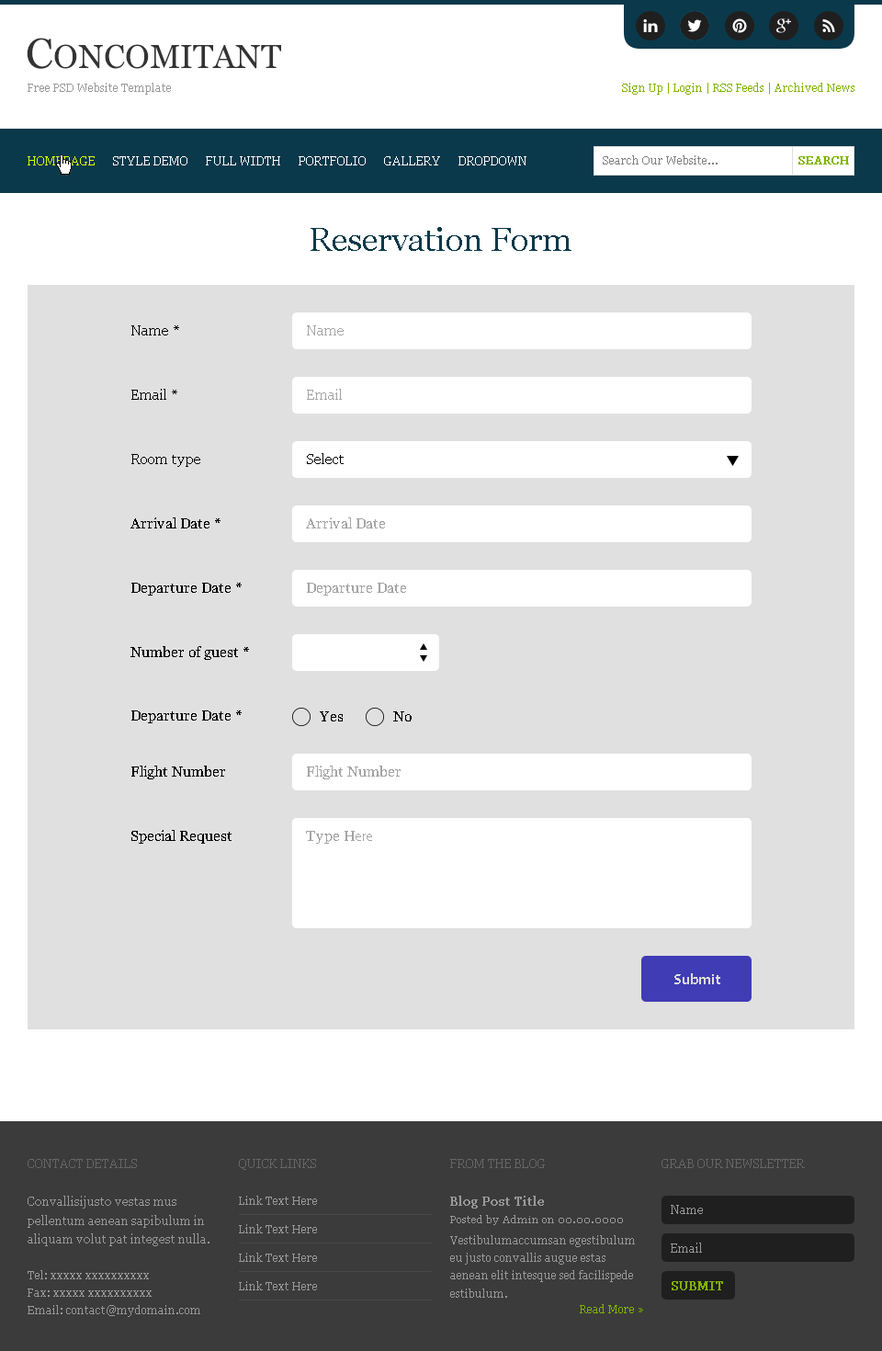
<style>
.page{position:relative;width:882px;height:1351px;background:#ffffff}
.page>*{position:absolute;margin:0}
.t1{font:33.1px "Georgia";color:#333333}
.t2{font:42.3px "Georgia";color:#333333}
.t3{font:11px "Georgia";color:#999999}
.t4{font:11px "Georgia";color:#81b300}
.t5{font:11.9px "Georgia";color:#d8ff00}
.t6{font:11.9px "Georgia";color:#ffffff}
.t7{font:11px "Georgia";color:#7f7f7f}
.t8{font:11px "Georgia";color:#81b300;font-weight:bold}
.t9{font:33.1px "Georgia";color:#0a394b}
.t10{font:14.7px "Georgia";color:#000000}
.t11{font:14.7px "Georgia";color:#a4a4a4}
.t12{font:14.7px "MyriadPro-Regular";color:#a4a4a4}
.t13{font:14.7px "MyriadPro-Bold";color:#e0e0e0}
.t14{font:11.9px "Georgia";color:#666666}
.t15{font:11.9px/19.1px "Georgia";color:#999999}
.t16{font:11px/17.6px "Georgia";color:#999999}
.t17{font:11.9px "Georgia";color:#999999;font-weight:bold}
.t18{font:11.9px "Georgia";color:#999999}
.t19{font:10.1px "Georgia";color:#999999}
.t20{font:11.9px "Georgia";color:#81b300;font-weight:bold}
</style>
<div class="page">
<p class="t1" style="left:27px;top:38px;width:254px;height:31px"><span class="t2">C</span>ONCOMITANT</p>
<p class="t3" style="left:28px;top:83px;width:143px;height:12px">Free PSD Website Template</p>
<p class="t4" style="left:622px;top:83px;width:233px;height:12px">Sign Up | Login | RSS Feeds | Archived News</p>
<p class="t5" style="left:28px;top:156px;width:67px;height:9px">HOMEPAGE</p>
<p class="t6" style="left:113px;top:156px;width:75px;height:9px">STYLE DEMO</p>
<p class="t6" style="left:206px;top:156px;width:74px;height:9px">FULL WIDTH</p>
<p class="t6" style="left:299px;top:156px;width:67px;height:9px">PORTFOLIO</p>
<p class="t6" style="left:384px;top:156px;width:56px;height:9px">GALLERY</p>
<p class="t6" style="left:459px;top:156px;width:68px;height:9px">DROPDOWN</p>
<p class="t7" style="left:603px;top:155px;width:115px;height:10px">Search Our Website...</p>
<p class="t8" style="left:799px;top:156px;width:50px;height:9px">SEARCH</p>
<p class="t9" style="left:311px;top:227px;width:261px;height:24px">Reservation Form</p>
<p class="t10" style="left:131px;top:325px;width:48px;height:11px">Name *</p>
<p class="t11" style="left:307px;top:325px;width:37px;height:11px">Name</p>
<p class="t10" style="left:131px;top:389px;width:46px;height:11px">Email *</p>
<p class="t11" style="left:307px;top:389px;width:35px;height:11px">Email</p>
<p class="t10" style="left:131px;top:454px;width:69px;height:13px">Room type</p>
<p class="t10" style="left:307px;top:453px;width:37px;height:11px">Select</p>
<p class="t10" style="left:131px;top:518px;width:90px;height:11px">Arrival Date *</p>
<p class="t11" style="left:306px;top:518px;width:79px;height:11px">Arrival Date</p>
<p class="t10" style="left:131px;top:583px;width:111px;height:13px">Departure Date *</p>
<p class="t11" style="left:307px;top:583px;width:99px;height:13px">Departure Date</p>
<p class="t10" style="left:131px;top:646px;width:118px;height:14px">Number of guest *</p>
<p class="t10" style="left:131px;top:711px;width:111px;height:12px">Departure Date *</p>
<p class="t10" style="left:320px;top:711px;width:23px;height:11px">Yes</p>
<p class="t10" style="left:393px;top:711px;width:19px;height:11px">No</p>
<p class="t10" style="left:131px;top:766px;width:94px;height:14px">Flight Number</p>
<p class="t11" style="left:307px;top:766px;width:94px;height:14px">Flight Number</p>
<p class="t10" style="left:131px;top:830px;width:101px;height:14px">Special Request</p>
<p class="t11" style="left:306px;top:831px;width:66px;height:13px">Type H<span class="t12">ere</span></p>
<p class="t13" style="left:675px;top:973px;width:46px;height:11px">Submit</p>
<p class="t14" style="left:28px;top:1159px;width:109px;height:9px">CONTACT DETAILS</p>
<p class="t14" style="left:239px;top:1159px;width:77px;height:11px">QUICK LINKS</p>
<p class="t14" style="left:450px;top:1159px;width:95px;height:9px">FROM THE BLOG</p>
<p class="t14" style="left:662px;top:1159px;width:143px;height:9px">GRAB OUR NEWSLETTER</p>
<p class="t15" style="left:28px;top:1196px;width:182px;height:121px">Convallisijusto vestas mus pellentum aenean sapibulum in aliquam volut pat integest nulla. <br><span class="t16"><br>Tel: xxxxx xxxxxxxxxx<br>Fax: xxxxx xxxxxxxxxx<br>Email: contact@mydomain.com</span></p>
<p class="t3" style="left:239px;top:1196px;width:78px;height:9px">Link Text Here</p>
<p class="t17" style="left:450px;top:1196px;width:94px;height:13px">Blog Post Title</p>
<p class="t18" style="left:671px;top:1205px;width:32px;height:9px">Name</p>
<p class="t19" style="left:450px;top:1215px;width:173px;height:10px">Posted by Admin on 00.00.0000</p>
<p class="t3" style="left:239px;top:1224px;width:78px;height:10px">Link Text Here</p>
<p class="t16" style="left:450px;top:1235px;width:185px;height:63px">Vestibulumaccumsan egestibulum eu justo convallis augue estas aenean elit intesque sed facilispede estibulum.</p>
<p class="t3" style="left:239px;top:1253px;width:78px;height:9px">Link Text Here</p>
<p class="t18" style="left:671px;top:1243px;width:31px;height:10px">Email</p>
<p class="t3" style="left:239px;top:1281px;width:78px;height:10px">Link Text Here</p>
<p class="t20" style="left:672px;top:1281px;width:51px;height:10px">SUBMIT</p>
<p class="t4" style="left:580px;top:1304px;width:63px;height:10px">Read More »</p>
</div>
